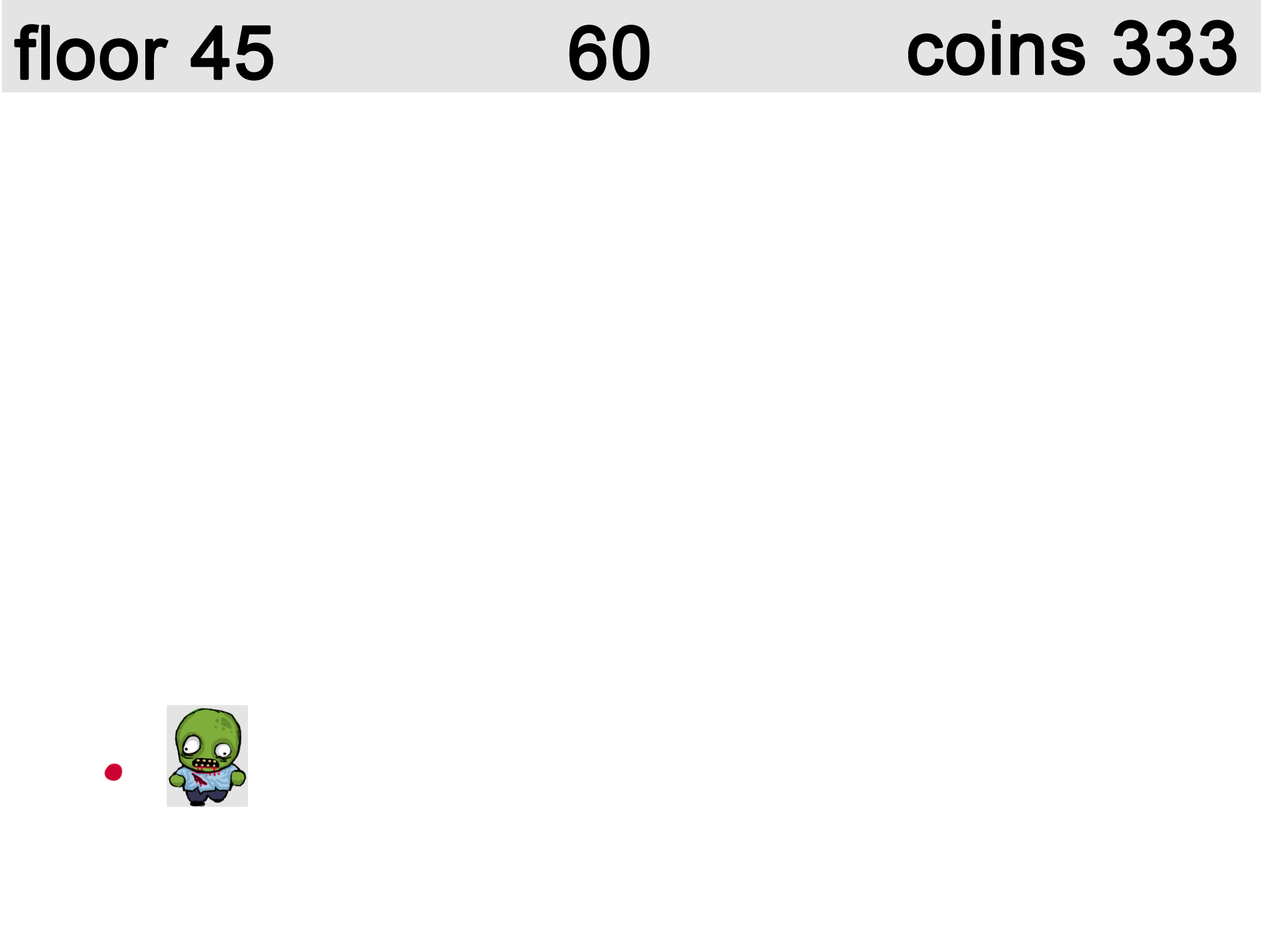
<style>
.page{position:relative;width:1261px;height:946px;background:#ffffff}
.page>*{position:absolute;margin:0}
.t1{font:73.9px "ArialMT";color:#000000;font-weight:bold}
</style>
<div class="page">
<p class="t1" style="left:14px;top:24px;width:259px;height:57px">floor 45</p>
<p class="t1" style="left:569px;top:25px;width:81px;height:56px">60</p>
<p class="t1" style="left:908px;top:20px;width:328px;height:56px">coins 333</p>
</div>
